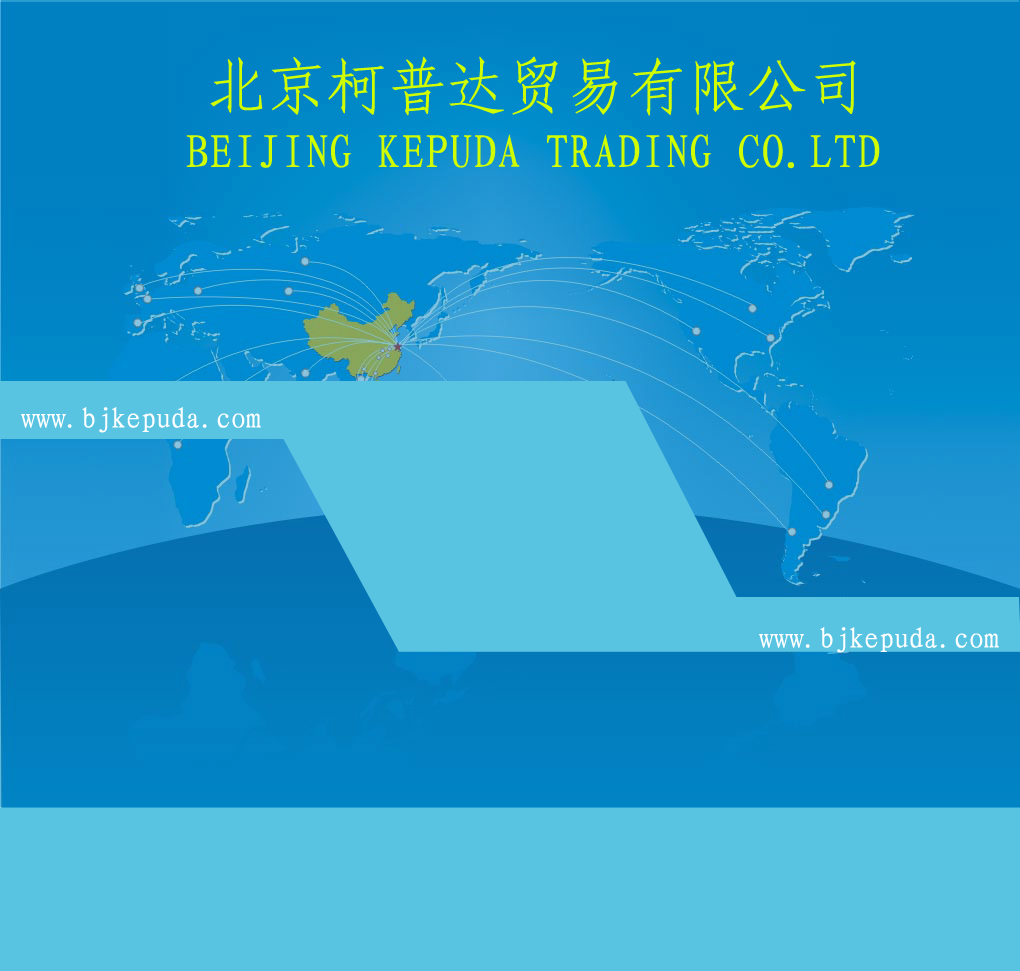
<style>
.page{position:relative;width:1020px;height:971px;background:#59c3e2}
.page>*{position:absolute;margin:0}
.t1{font:60px "FangSong_GB2312";color:#d1fd03}
.t2{font:48px "FangSong_GB2312";color:#d1fd03}
.t3{font:30px "FangSong_GB2312";color:#ffffff}
</style>
<div class="page">
<p class="t1" style="left:210px;top:56px;width:646px;height:60px">北京柯普达贸易有限公司</p>
<p class="t2" style="left:186px;top:134px;width:694px;height:35px">BEIJING KEPUDA TRADING CO.LTD</p>
<p class="t3" style="left:21px;top:407px;width:240px;height:26px">www.bjkepuda.com</p>
<p class="t3" style="left:759px;top:627px;width:240px;height:26px">www.bjkepuda.com</p>
</div>
